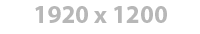
<style>
.page{position:relative;width:200px;height:34px;background:#ffffff}
.page>*{position:absolute;margin:0}
.t1{font:25px "MyriadPro-Bold";color:#b7b7b7}
</style>
<div class="page">
<p class="t1" style="left:35px;top:6px;width:132px;height:17px">1920 x 1200</p>
</div>
